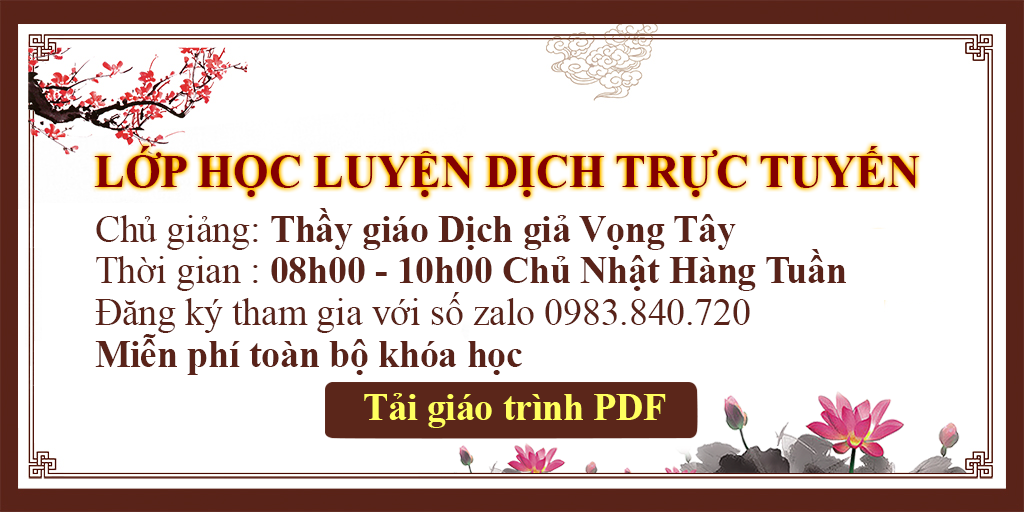
<style>
.page{position:relative;width:1024px;height:512px;background:#ffffff}
.page>*{position:absolute;margin:0}
.t1{font:45.8px "TimesNewRomanPS-BoldMT";color:#840001;text-transform:uppercase}
.t2{font:37.5px/41.7px "TimesNewRomanPSMT";color:#592319}
.t3{font:37.5px/41.7px "TimesNewRomanPS-BoldMT";color:#592319}
.t4{font:37.5px "TimesNewRomanPS-BoldMT";color:#ffff5e}
</style>
<div class="page">
<p class="t1" style="left:94px;top:146px;width:826px;height:51px">lớp học LUyện dịch trực tuyến</p>
<p class="t2" style="left:95px;top:208px;width:751px;height:167px">Chủ giảng: <span class="t3">Thầy giáo Dịch giả Vọng Tây<br></span>Thời gian : <span class="t3">08h00 - 10h00 Chủ Nhật Hàng Tuần<br></span>Đăng ký tham gia với số zalo 0983.840.720<br><span class="t3">Miễn phí toàn bộ khóa học</span></p>
<p class="t4" style="left:364px;top:393px;width:302px;height:35px">Tải giáo trình PDF</p>
</div>
